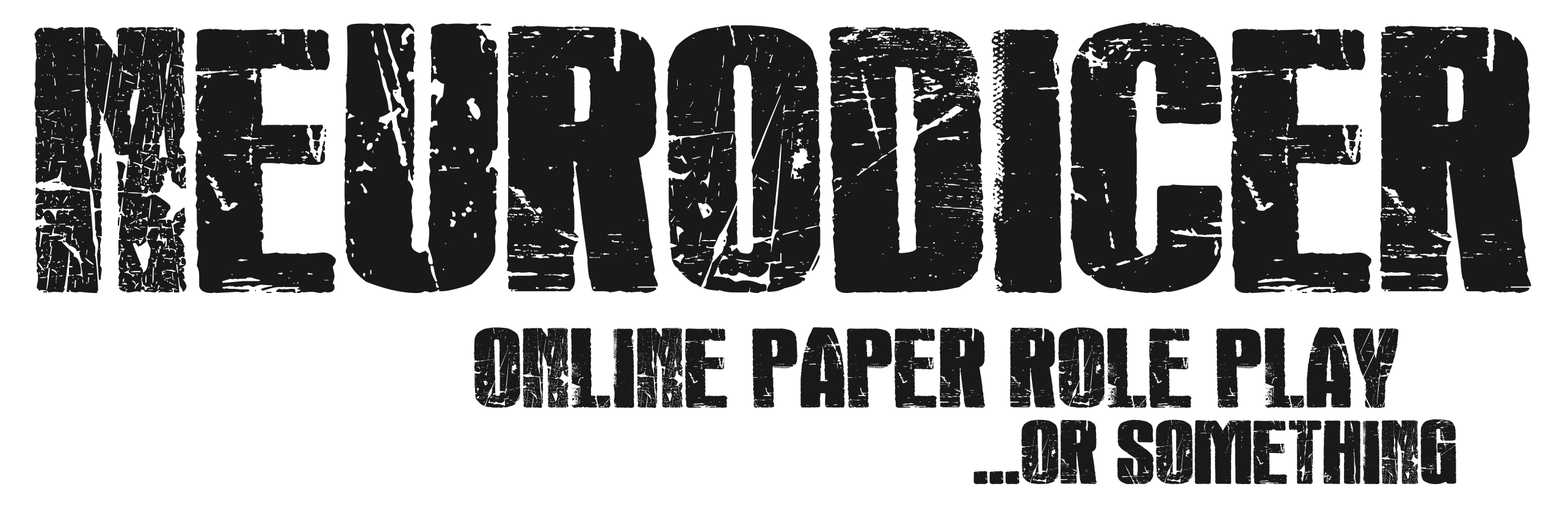
<style>
.page{position:relative;width:1568px;height:514px;background:#ffffff}
.page>*{position:absolute;margin:0}
.t1{font:305.3px "Rock'sDeath";color:#191919;text-transform:uppercase}
.t2{font:91.6px/76.3px "Rock'sDeath";color:#191919;text-transform:uppercase}
.t3{font:73.3px/76.3px "Rock'sDeath";color:#191919;text-transform:uppercase}
</style>
<div class="page">
<p class="t1" style="left:34px;top:22px;width:1497px;height:271px">NEURODICER</p>
<p class="t2" style="left:474px;top:327px;width:982px;height:157px">ONLINE PAPER ROLE PLAY<br>                  <span class="t3">     ...OR SOMETHING</span></p>
</div>
